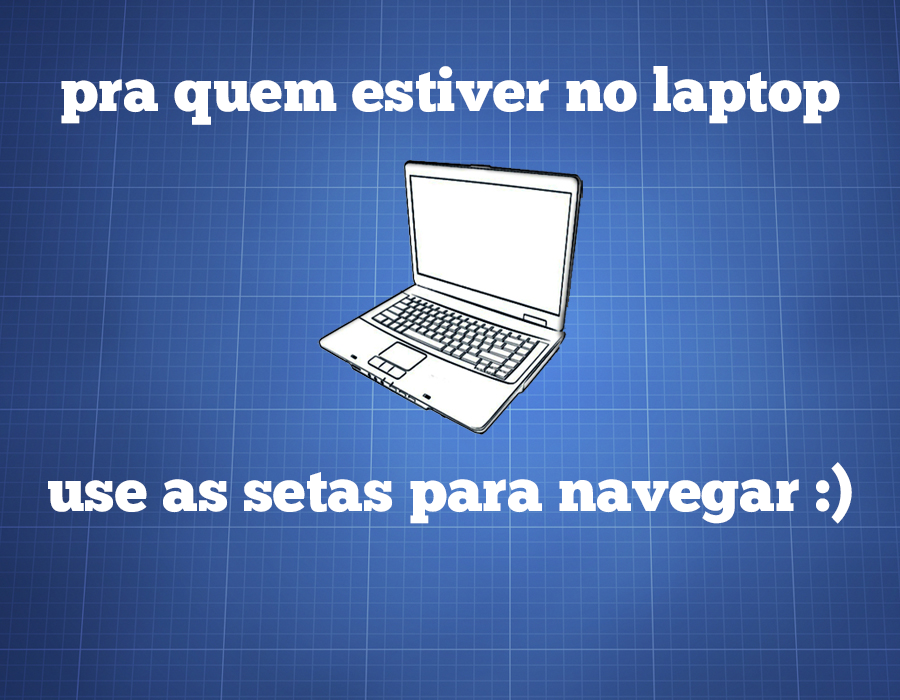
<style>
.page{position:relative;width:900px;height:700px}
.page>*{position:absolute;margin:0}
.t1{font:60px "ChunkFive-Roman";color:#ffffff}
</style>
<div class="page">
<p class="t1" style="left:61px;top:66px;width:779px;height:59px">pra quem estiver no laptop</p>
<p class="t1" style="left:48px;top:462px;width:804px;height:62px">use as setas para navegar :)</p>
</div>
